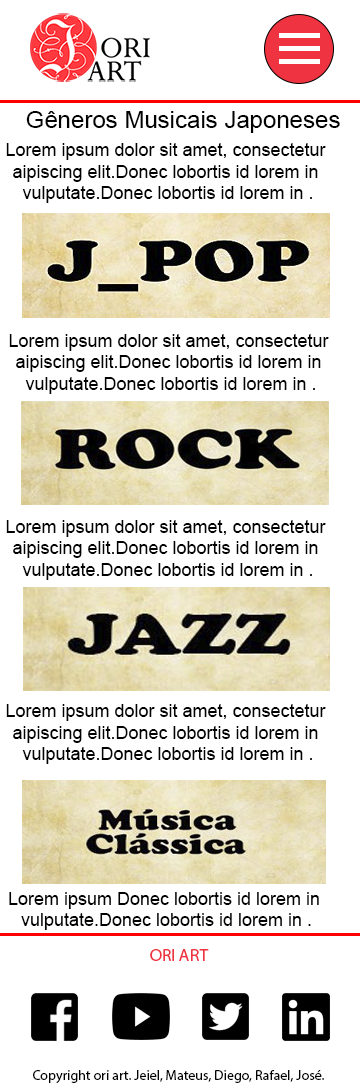
<style>
.page{position:relative;width:360px;height:1089px;background:#ffffff}
.page>*{position:absolute;margin:0}
.t1{font:24px "ArialMT";color:#000000}
.t2{font:18px "ArialMT";color:#000000}
</style>
<div class="page">
<p class="t1" style="left:26px;top:111px;width:314px;height:22px">Gêneros Musicais Japoneses</p>
<p class="t2" style="left:6px;top:143px;width:320px;height:60px;text-align:center">Lorem ipsum dolor sit amet, consectetur <br>aipiscing elit.Donec lobortis id lorem in <br>vulputate.Donec lobortis id lorem in .</p>
<p class="t2" style="left:9px;top:334px;width:320px;height:60px;text-align:center">Lorem ipsum dolor sit amet, consectetur <br>aipiscing elit.Donec lobortis id lorem in <br>vulputate.Donec lobortis id lorem in .</p>
<p class="t2" style="left:6px;top:520px;width:320px;height:60px;text-align:center">Lorem ipsum dolor sit amet, consectetur <br>aipiscing elit.Donec lobortis id lorem in <br>vulputate.Donec lobortis id lorem in .</p>
<p class="t2" style="left:6px;top:704px;width:320px;height:60px;text-align:center">Lorem ipsum dolor sit amet, consectetur <br>aipiscing elit.Donec lobortis id lorem in <br>vulputate.Donec lobortis id lorem in .</p>
<p class="t2" style="left:9px;top:892px;width:310px;height:38px;text-align:center">Lorem ipsum Donec lobortis id lorem in <br>vulputate.Donec lobortis id lorem in .</p>
</div>
